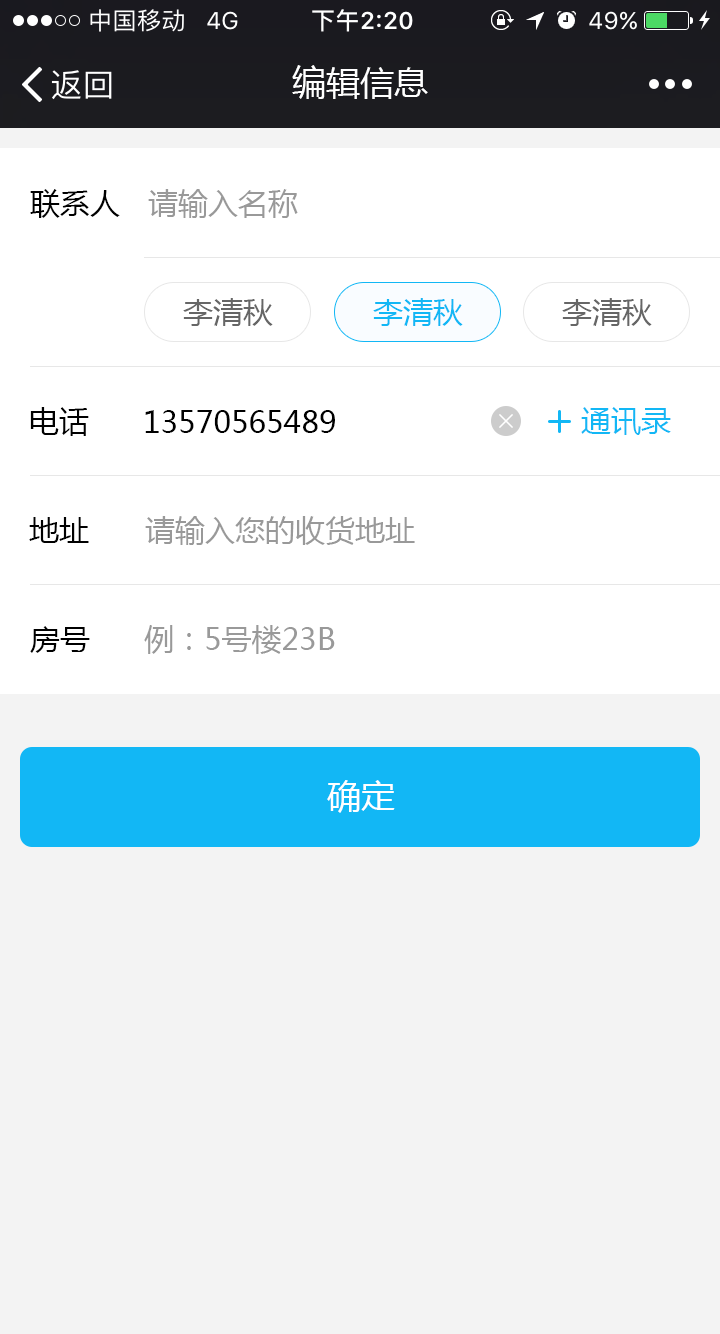
<style>
.page{position:relative;width:720px;height:1334px;background:#f3f3f3}
.page>*{position:absolute;margin:0}
.t1{font:34px "MicrosoftYaHei";color:#ffffff}
.t2{font:30px "MicrosoftYaHei";color:#000000}
.t3{font:30px "MicrosoftYaHei";color:#999999}
.t4{font:30px "MicrosoftYaHei";color:#666666}
.t5{font:30px "MicrosoftYaHei";color:#12b7f5}
</style>
<div class="page">
<p class="t1" style="left:292px;top:65px;width:136px;height:34px">编辑信息</p>
<p class="t2" style="left:30px;top:189px;width:90px;height:29px">联系人</p>
<p class="t3" style="left:148px;top:189px;width:150px;height:29px">请输入名称</p>
<p class="t4" style="left:183px;top:298px;width:90px;height:28px">李清秋</p>
<p class="t5" style="left:373px;top:298px;width:90px;height:28px">李清秋</p>
<p class="t4" style="left:562px;top:298px;width:90px;height:28px">李清秋</p>
<p class="t2" style="left:30px;top:407px;width:59px;height:29px">电话</p>
<p class="t2" style="left:145px;top:410px;width:190px;height:23px">13570565489</p>
<p class="t5" style="left:581px;top:407px;width:90px;height:28px">通讯录</p>
<p class="t2" style="left:29px;top:517px;width:60px;height:26px">地址</p>
<p class="t3" style="left:145px;top:516px;width:270px;height:29px">请输入您的收货地址</p>
<p class="t2" style="left:30px;top:626px;width:60px;height:27px">房号</p>
<p class="t3" style="left:144px;top:625px;width:191px;height:29px">例：5号楼23B</p>
<p class="t1" style="left:327px;top:780px;width:68px;height:33px">确定</p>
</div>
